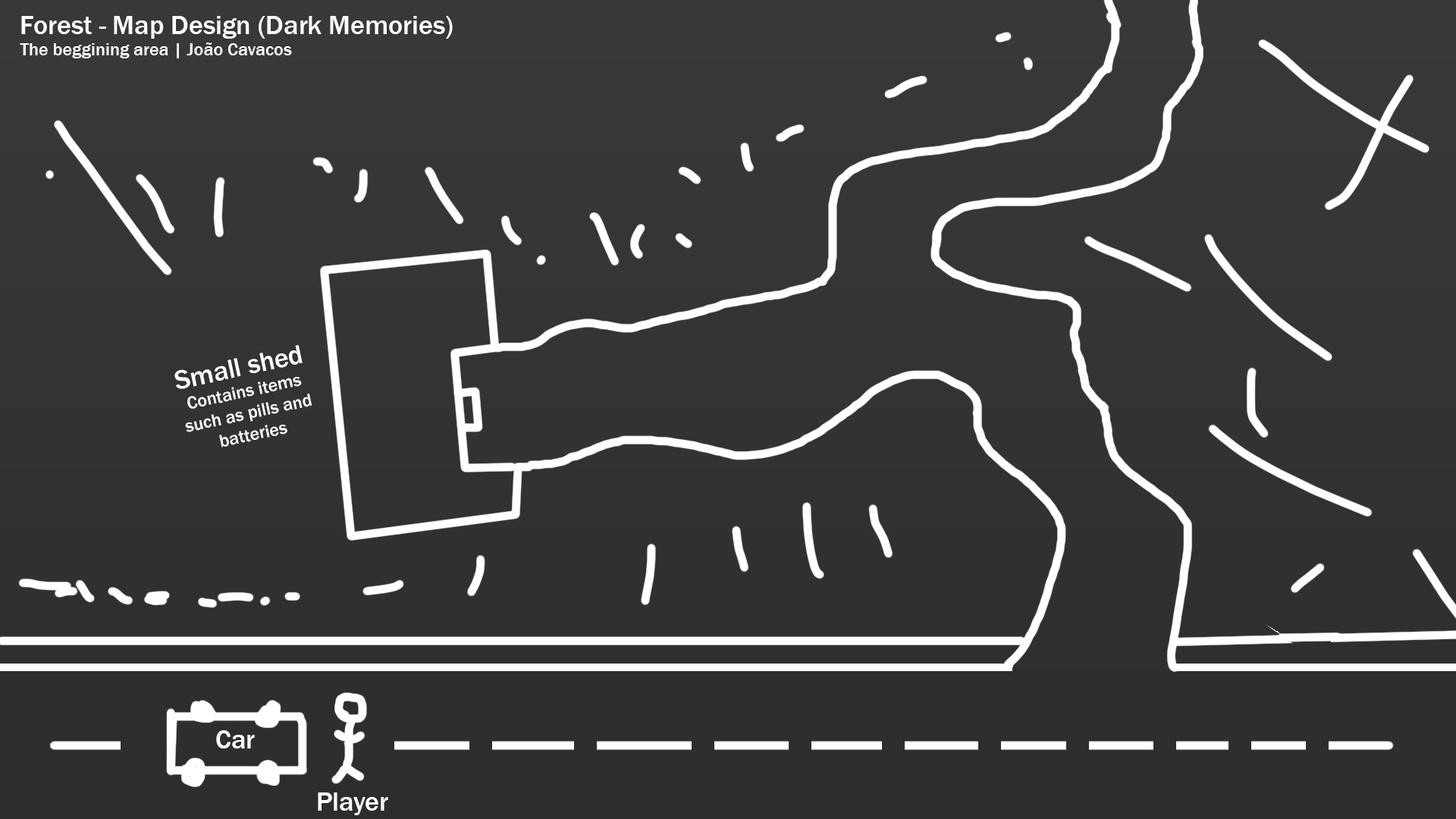
<style>
.page{position:relative;width:1456px;height:819px}
.page>*{position:absolute;margin:0}
.t1{font:27.3px "FranklinGothic-Medium";color:#ffffff}
.t2{font:18.2px "FranklinGothic-Medium";color:#ffffff}
</style>
<div class="page">
<p class="t1" style="left:20px;top:16px;width:433px;height:42px">Forest - Map Design (Dark Memories)<br><span class="t2">The beggining area | João Cavacos</span></p>
<p class="t2" style="left:174px;top:345px;width:138px;height:102px;text-align:center;rotate:-12deg"><span class="t1">Small shed<br></span>Contains items such as pills and batteries</p>
<p class="t1" style="left:216px;top:730px;width:39px;height:18px">Car</p>
<p class="t1" style="left:318px;top:792px;width:70px;height:23px">Player</p>
</div>
